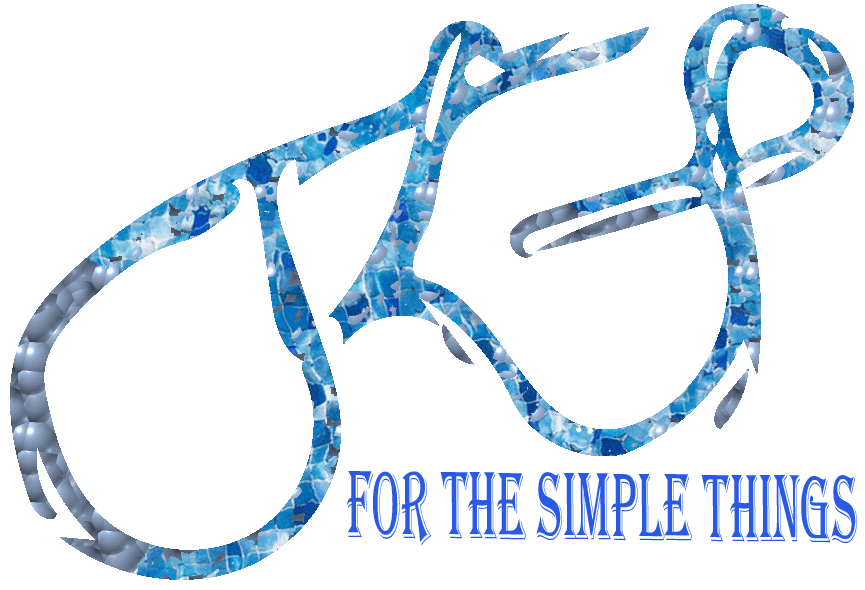
<style>
.page{position:relative;width:865px;height:590px;background:#ffffff}
.page>*{position:absolute;margin:0}
.t1{font:98.9px "Algerian";color:#295ae6;scale:0.47 1}
</style>
<div class="page">
<p class="t1" style="left:347px;top:471px;width:510px;height:74px;rotate:1deg">for the simple things</p>
</div>
